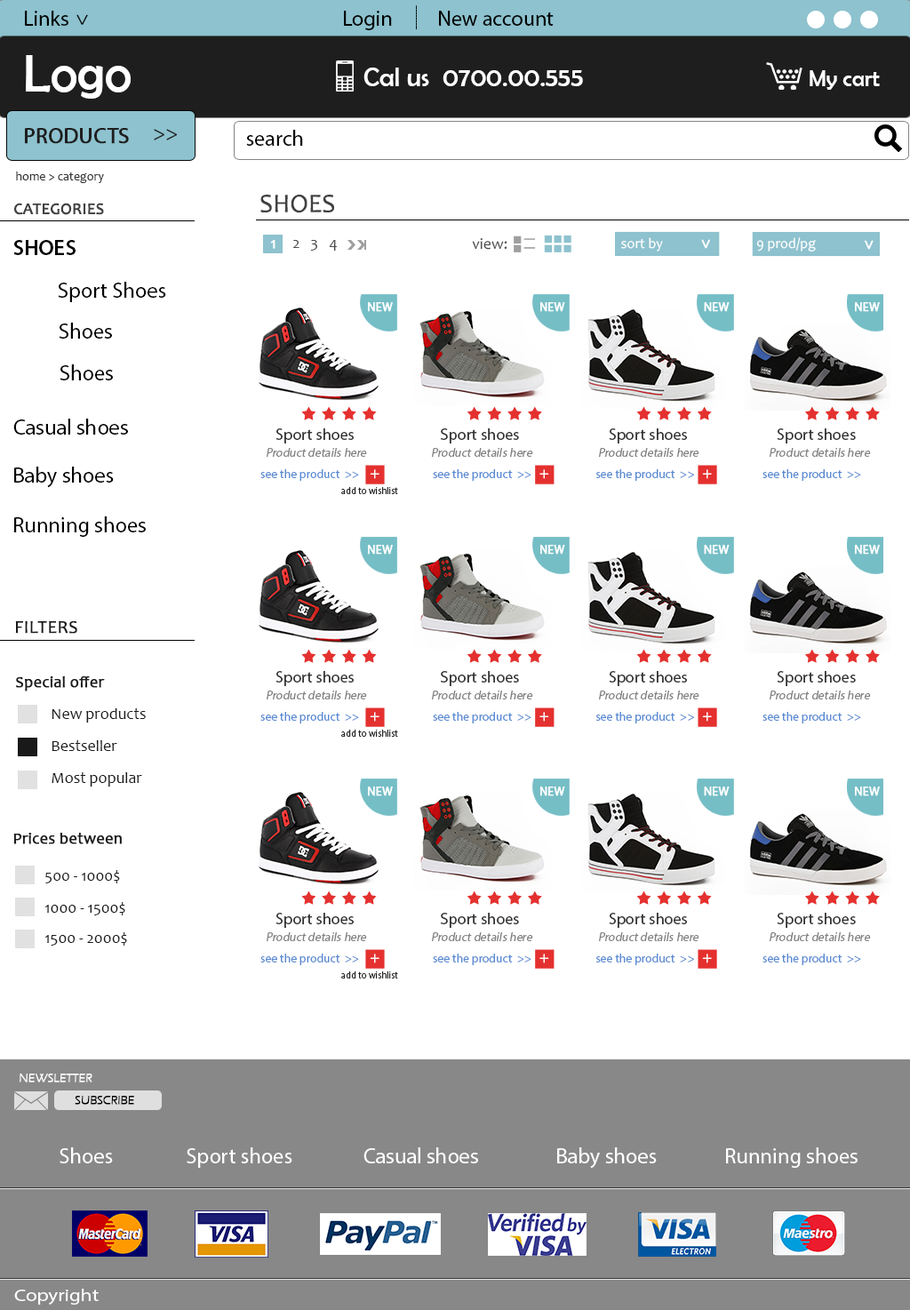
<style>
.page{position:relative;width:910px;height:1310px;background:#ffffff}
.page>*{position:absolute;margin:0}
.t1{font:21.3px "MyriadPro-Regular";color:#000000}
.t2{font:53.3px "BerlinSansFB-Reg";color:#ffffff}
.t3{font:26.7px "BerlinSansFB-Reg";color:#ffffff}
.t4{font:23px "BerlinSansFB-Reg";color:#ffffff}
.t5{font:21.7px "MyriadPro-Regular";color:#1e1e1e;text-transform:uppercase;font-weight:bold}
.t6{font:21.3px "MyriadPro-Regular";color:#1e1e1e;text-transform:uppercase}
.t7{font:21.7px "MyriadPro-Regular";color:#000000}
.t8{font:12.4px "Candara";color:#333333}
.t9{font:26.7px "Candara";color:#414040;text-transform:uppercase}
.t10{font:16px "Candara";color:#414040;text-transform:uppercase;font-weight:bold}
.t11{font:21.7px "MyriadPro-Semibold";color:#000000;text-transform:uppercase}
.t12{font:16px "Candara";color:#ffffff;font-weight:bold}
.t13{font:16px "Candara";color:#4b4b4b}
.t14{font:14.5px "Candara";color:#ffffff}
.t15{font:17.6px "ErasITC-Medium";color:#ffffff;font-weight:bold}
.t16{font:22.1px "MyriadPro-Regular";color:#000000}
.t17{font:12.1px "MyriadPro-Regular";color:#ffffff;text-transform:uppercase;font-weight:bold}
.t18{font:16.2px "MyriadPro-Regular";color:#343434}
.t19{font:12.1px "MyriadPro-Regular";color:#808080;font-style:italic}
.t20{font:12.1px "MyriadPro-Regular";color:#598ad3}
.t21{font:16.2px "MyriadPro-Regular";color:#ffffff;text-transform:uppercase}
.t22{font:9.4px "MyriadPro-Regular";color:#252525}
.t23{font:18px "Candara";color:#191919;text-transform:uppercase;font-weight:bold}
.t24{font:16px "Candara";color:#1a1a1a;font-weight:bold}
.t25{font:16px "Candara";color:#1a1a1a}
.t26{font:12.4px "ErasITC-Light";color:#ffffff;text-transform:uppercase;font-weight:bold}
.t27{font:12.4px "ErasITC-Light";color:#000000;text-transform:uppercase;font-weight:bold}
.t28{font:21.7px "MyriadPro-Regular";color:#ffffff}
.t29{font:17.2px "MyriadPro-Regular";color:#fffefe;scale:1.18 1}
</style>
<div class="page">
<p class="t1" style="left:25px;top:11px;width:43px;height:15px">Links</p>
<p class="t1" style="left:76px;top:14px;width:12px;height:11px;rotate:90deg">&gt;</p>
<p class="t1" style="left:344px;top:11px;width:48px;height:19px">Login</p>
<p class="t1" style="left:439px;top:11px;width:115px;height:15px">New account</p>
<p class="t2" style="left:26px;top:55px;width:105px;height:44px">Logo</p>
<p class="t3" style="left:364px;top:68px;width:219px;height:18px">Cal us  0700.00.555</p>
<p class="t4" style="left:810px;top:70px;width:70px;height:20px">My cart</p>
<p class="t5" style="left:25px;top:128px;width:104px;height:16px">Products</p>
<p class="t6" style="left:154px;top:129px;width:23px;height:11px">&gt;&gt;</p>
<p class="t7" style="left:246px;top:130px;width:57px;height:16px">search</p>
<p class="t8" style="left:16px;top:172px;width:88px;height:11px">home &gt; category</p>
<p class="t9" style="left:260px;top:195px;width:74px;height:18px">shoes</p>
<p class="t10" style="left:14px;top:203px;width:90px;height:12px">Categories</p>
<p class="t11" style="left:13px;top:240px;width:63px;height:15px">Shoes</p>
<p class="t12" style="left:270px;top:240px;width:6px;height:9px">1</p>
<p class="t13" style="left:293px;top:240px;width:7px;height:8px">2</p>
<p class="t13" style="left:310px;top:240px;width:7px;height:11px">3</p>
<p class="t13" style="left:329px;top:240px;width:8px;height:11px">4</p>
<p class="t13" style="left:472px;top:238px;width:36px;height:12px">view:</p>
<p class="t14" style="left:621px;top:237px;width:42px;height:15px">sort by</p>
<p class="t15" style="left:701px;top:239px;width:9px;height:10px;rotate:90deg">&gt;</p>
<p class="t14" style="left:756px;top:237px;width:60px;height:15px">9 prod/pg</p>
<p class="t15" style="left:865px;top:240px;width:9px;height:10px;rotate:90deg">&gt;</p>
<p class="t16" style="left:58px;top:282px;width:108px;height:20px">Sport Shoes</p>
<p class="t17" style="left:368px;top:302px;width:25px;height:10px">New</p>
<p class="t17" style="left:540px;top:302px;width:25px;height:10px">New</p>
<p class="t17" style="left:704px;top:302px;width:26px;height:10px">New</p>
<p class="t17" style="left:855px;top:302px;width:25px;height:10px">New</p>
<p class="t16" style="left:59px;top:323px;width:53px;height:16px">Shoes</p>
<p class="t16" style="left:60px;top:364px;width:53px;height:16px">Shoes</p>
<p class="t7" style="left:13px;top:419px;width:115px;height:16px">Casual shoes</p>
<p class="t18" style="left:276px;top:428px;width:78px;height:16px">Sport shoes</p>
<p class="t18" style="left:441px;top:428px;width:78px;height:16px">Sport shoes</p>
<p class="t18" style="left:609px;top:428px;width:78px;height:16px">Sport shoes</p>
<p class="t18" style="left:777px;top:428px;width:79px;height:16px">Sport shoes</p>
<p class="t19" style="left:267px;top:448px;width:100px;height:9px">Product details here</p>
<p class="t19" style="left:432px;top:448px;width:101px;height:9px">Product details here</p>
<p class="t19" style="left:599px;top:448px;width:101px;height:9px">Product details here</p>
<p class="t19" style="left:770px;top:448px;width:101px;height:9px">Product details here</p>
<p class="t7" style="left:14px;top:467px;width:100px;height:21px">Baby shoes</p>
<p class="t20" style="left:260px;top:469px;width:99px;height:12px">see the product  &gt;&gt;</p>
<p class="t21" style="left:370px;top:469px;width:10px;height:10px">+</p>
<p class="t20" style="left:433px;top:469px;width:99px;height:12px">see the product  &gt;&gt;</p>
<p class="t21" style="left:540px;top:469px;width:9px;height:10px">+</p>
<p class="t20" style="left:596px;top:469px;width:98px;height:12px">see the product  &gt;&gt;</p>
<p class="t21" style="left:702px;top:469px;width:10px;height:10px">+</p>
<p class="t20" style="left:763px;top:469px;width:98px;height:12px">see the product  &gt;&gt;</p>
<p class="t22" style="left:341px;top:487px;width:57px;height:7px">add to wishlist</p>
<p class="t7" style="left:14px;top:516px;width:132px;height:21px">Running shoes</p>
<p class="t17" style="left:368px;top:545px;width:25px;height:10px">New</p>
<p class="t17" style="left:540px;top:545px;width:25px;height:10px">New</p>
<p class="t17" style="left:704px;top:545px;width:26px;height:10px">New</p>
<p class="t17" style="left:855px;top:545px;width:25px;height:10px">New</p>
<p class="t23" style="left:15px;top:621px;width:62px;height:13px">filters</p>
<p class="t24" style="left:16px;top:676px;width:89px;height:16px">Special offer</p>
<p class="t18" style="left:276px;top:671px;width:78px;height:15px">Sport shoes</p>
<p class="t18" style="left:441px;top:671px;width:78px;height:15px">Sport shoes</p>
<p class="t18" style="left:609px;top:671px;width:78px;height:15px">Sport shoes</p>
<p class="t18" style="left:777px;top:671px;width:79px;height:15px">Sport shoes</p>
<p class="t19" style="left:267px;top:691px;width:100px;height:9px">Product details here</p>
<p class="t19" style="left:432px;top:691px;width:101px;height:9px">Product details here</p>
<p class="t19" style="left:599px;top:691px;width:101px;height:9px">Product details here</p>
<p class="t19" style="left:770px;top:691px;width:101px;height:9px">Product details here</p>
<p class="t25" style="left:52px;top:708px;width:94px;height:15px">New products</p>
<p class="t20" style="left:260px;top:712px;width:99px;height:12px">see the product  &gt;&gt;</p>
<p class="t21" style="left:370px;top:712px;width:10px;height:10px">+</p>
<p class="t20" style="left:433px;top:712px;width:99px;height:12px">see the product  &gt;&gt;</p>
<p class="t21" style="left:540px;top:712px;width:9px;height:10px">+</p>
<p class="t20" style="left:596px;top:712px;width:98px;height:12px">see the product  &gt;&gt;</p>
<p class="t21" style="left:702px;top:712px;width:10px;height:10px">+</p>
<p class="t20" style="left:763px;top:712px;width:98px;height:12px">see the product  &gt;&gt;</p>
<p class="t22" style="left:341px;top:730px;width:57px;height:7px">add to wishlist</p>
<p class="t25" style="left:52px;top:740px;width:65px;height:11px">Bestseller</p>
<p class="t25" style="left:52px;top:772px;width:90px;height:15px">Most popular</p>
<p class="t17" style="left:368px;top:787px;width:25px;height:9px">New</p>
<p class="t17" style="left:540px;top:787px;width:25px;height:9px">New</p>
<p class="t17" style="left:704px;top:787px;width:26px;height:9px">New</p>
<p class="t17" style="left:855px;top:787px;width:25px;height:9px">New</p>
<p class="t24" style="left:13px;top:833px;width:109px;height:11px">Prices between</p>
<p class="t25" style="left:45px;top:870px;width:75px;height:13px">500 - 1000$</p>
<p class="t25" style="left:44px;top:902px;width:81px;height:13px">1000 - 1500$</p>
<p class="t18" style="left:276px;top:913px;width:78px;height:15px">Sport shoes</p>
<p class="t18" style="left:441px;top:913px;width:78px;height:15px">Sport shoes</p>
<p class="t18" style="left:609px;top:913px;width:78px;height:15px">Sport shoes</p>
<p class="t18" style="left:777px;top:913px;width:79px;height:15px">Sport shoes</p>
<p class="t25" style="left:44px;top:932px;width:83px;height:14px">1500 - 2000$</p>
<p class="t19" style="left:267px;top:932px;width:100px;height:9px">Product details here</p>
<p class="t19" style="left:432px;top:932px;width:101px;height:9px">Product details here</p>
<p class="t19" style="left:599px;top:932px;width:101px;height:9px">Product details here</p>
<p class="t19" style="left:770px;top:932px;width:101px;height:9px">Product details here</p>
<p class="t20" style="left:260px;top:954px;width:99px;height:11px">see the product  &gt;&gt;</p>
<p class="t21" style="left:370px;top:954px;width:10px;height:9px">+</p>
<p class="t20" style="left:433px;top:954px;width:99px;height:11px">see the product  &gt;&gt;</p>
<p class="t21" style="left:540px;top:954px;width:9px;height:9px">+</p>
<p class="t20" style="left:596px;top:954px;width:98px;height:11px">see the product  &gt;&gt;</p>
<p class="t21" style="left:702px;top:954px;width:10px;height:9px">+</p>
<p class="t20" style="left:763px;top:954px;width:98px;height:11px">see the product  &gt;&gt;</p>
<p class="t22" style="left:341px;top:971px;width:57px;height:8px">add to wishlist</p>
<p class="t26" style="left:20px;top:1074px;width:72px;height:9px">Newsletter</p>
<p class="t27" style="left:75px;top:1096px;width:59px;height:9px">subscribe</p>
<p class="t28" style="left:60px;top:1147px;width:53px;height:16px">Shoes</p>
<p class="t28" style="left:187px;top:1147px;width:105px;height:21px">Sport shoes</p>
<p class="t28" style="left:364px;top:1147px;width:114px;height:16px">Casual shoes</p>
<p class="t28" style="left:557px;top:1147px;width:100px;height:22px">Baby shoes</p>
<p class="t28" style="left:726px;top:1147px;width:132px;height:21px">Running shoes</p>
<p class="t29" style="left:14px;top:1289px;width:85px;height:16px">Copyright</p>
</div>
